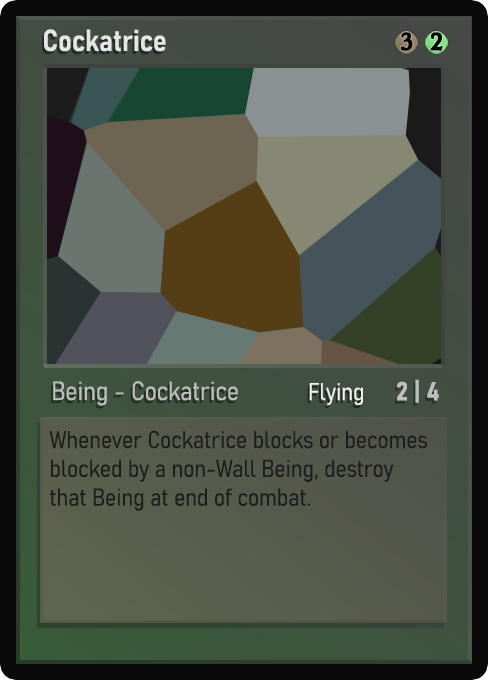
<style>
.page{position:relative;width:488px;height:680px}
.page>*{position:absolute;margin:0}
.t1{font:30px "Bahnschrift-SemiBoldSemiCondensed";color:#f2f2f2;font-weight:bold}
.t2{font:25px "WTRRoycroft";color:#000000;font-weight:bold;scale:1.09 1}
.t3{font:26px "Bahnschrift-LightSemiCondensed";color:#c8c8c8;font-weight:bold}
.t4{font:24px "Bahnschrift-LightSemiCondensed";color:#f0efef;font-weight:bold}
.t5{font:26px "Bahnschrift-BoldSemiCondensed";color:#bdbfbd;font-weight:bold}
.t6{font:24px "Bahnschrift-LightSemiCondensed";color:#1e1e1e;font-weight:bold}
</style>
<div class="page">
<p class="t1" style="left:44px;top:29px;width:122px;height:23px;opacity:0.9">Cockatrice</p>
<p class="t2" style="left:400px;top:32px;width:13px;height:19px">3</p>
<p class="t2" style="left:430px;top:32px;width:13px;height:19px">2</p>
<p class="t3" style="left:53px;top:381px;width:185px;height:25px;opacity:0.9">Being - Cockatrice</p>
<p class="t4" style="left:309px;top:383px;width:54px;height:23px">Flying</p>
<p class="t5" style="left:397px;top:379px;width:42px;height:24px">2 | 4</p>
<p class="t6" style="left:49px;top:430px;width:378px;height:81px">Whenever Cockatrice blocks or becomes blocked by a non-Wall Being, destroy that Being at end of combat.</p>
</div>
